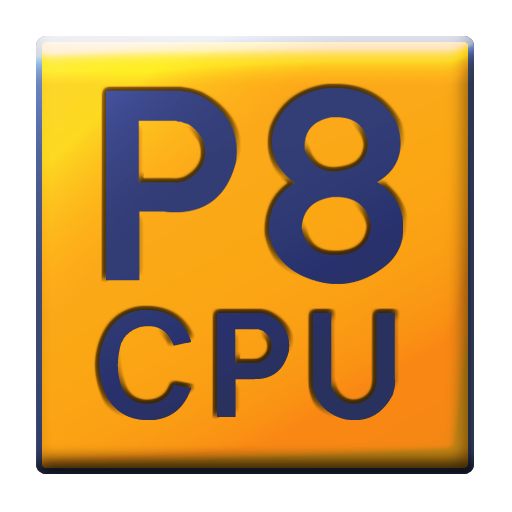
<style>
.page{position:relative;width:512px;height:512px;background:#ffffff}
.page>*{position:absolute;margin:0}
.t1{font:254px "Transport";color:#333d76}
.t2{font:140px "Transport-Medium";color:#333d76}
</style>
<div class="page">
<p class="t1" style="left:106px;top:88px;width:297px;height:196px">P8</p>
<p class="t2" style="left:99px;top:310px;width:297px;height:110px">CPU</p>
</div>
